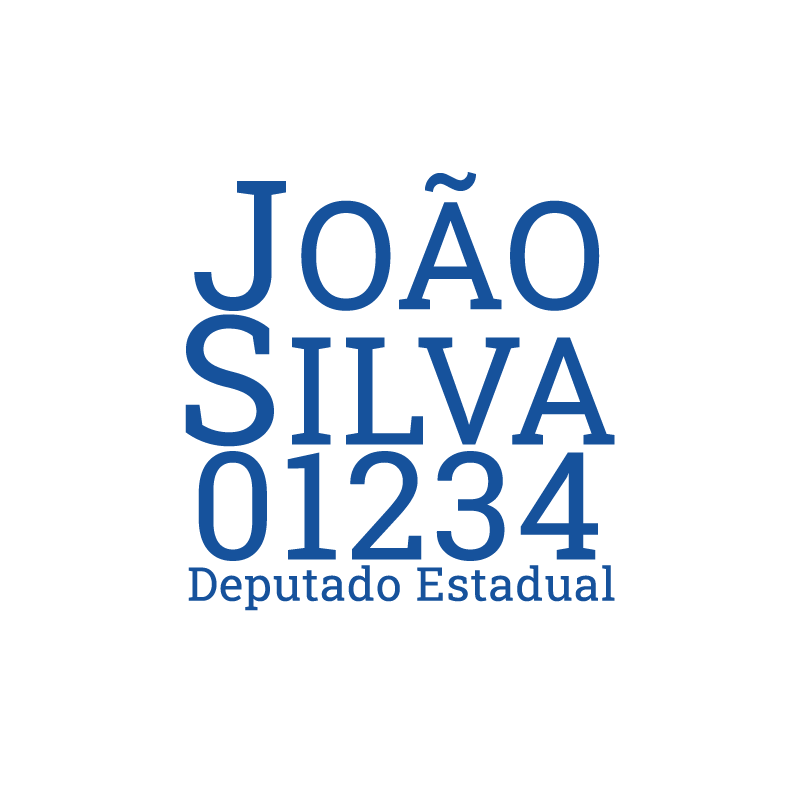
<style>
.page{position:relative;width:800px;height:800px;background:#ffffff}
.page>*{position:absolute;margin:0}
.t1{font:150.2px "RobotoSlab-Regular";letter-spacing:0.025em;color:#16529c}
.t2{font:180px "RobotoSlab-Regular";letter-spacing:0.025em;color:#16529c}
.t3{font:150px "RobotoSlab-Regular";letter-spacing:0.025em;color:#16529c}
.t4{font:46.4px "RobotoSlab-Regular";letter-spacing:0.025em;color:#16529c}
</style>
<div class="page">
<p class="t1" style="left:194px;top:172px;width:406px;height:139px"><span class="t2">J</span>OÃO</p>
<p class="t3" style="left:185px;top:314px;width:430px;height:133px"><span class="t2">S</span>ILVA</p>
<p class="t3" style="left:198px;top:451px;width:400px;height:110px">01234</p>
<p class="t4" style="left:188px;top:565px;width:427px;height:46px">Deputado Estadual</p>
</div>
